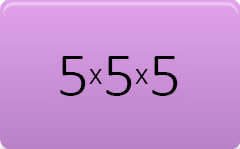
<style>
.page{position:relative;width:240px;height:149px}
.page>*{position:absolute;margin:0}
.t1{font:64px "Calibri-Light";color:#000000}
.t2{font:32px "Calibri-Light";color:#000000}
</style>
<div class="page">
<p class="t1" style="left:60px;top:56px;width:118px;height:40px">5<span class="t2">x</span>5<span class="t2">x</span>5</p>
</div>
